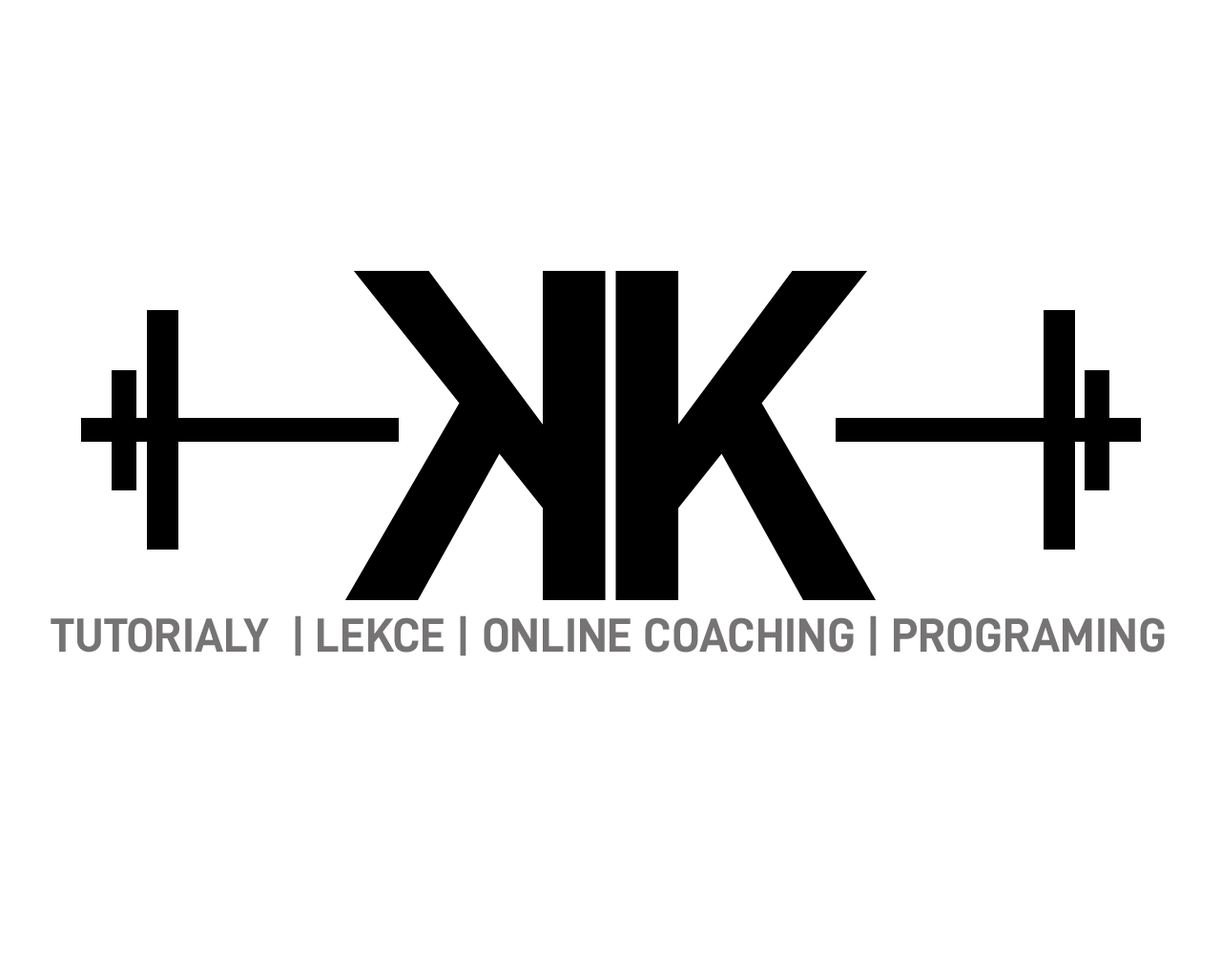
<style>
.page{position:relative;width:1221px;height:977px;background:#ffffff}
.page>*{position:absolute;margin:0}
.t1{font:47.8px "D-DIN-Bold";color:#757373}
</style>
<div class="page">
<p class="t1" style="left:51px;top:615px;width:1114px;height:41px">TUTORIALY  | LEKCE | ONLINE COACHING | PROGRAMING</p>
</div>
